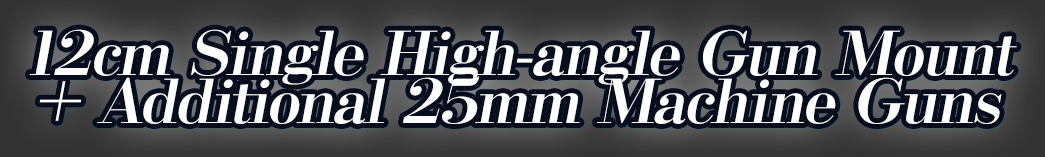
<style>
.page{position:relative;width:1045px;height:157px;background:#070d1d}
.page>*{position:absolute;margin:0}
.t1{font:60px/48px "KochoStd-Heavy";letter-spacing:-0.04em;color:#ffffff;font-style:italic;scale:1.04 1}
</style>
<div class="page">
<p class="t1" style="left:29px;top:29px;width:988px;height:95px;text-align:center">12cm Single High-angle Gun Mount<br>+ Additional 25mm Machine Guns</p>
</div>
